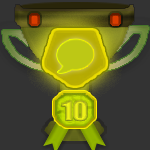
<style>
.page{position:relative;width:150px;height:150px;background:#333333}
.page>*{position:absolute;margin:0}
.t1{font:24.2px "Impact";scale:1.16 1}
</style>
<div class="page">
<p class="t1" style="left:62px;top:100px;width:25px;height:21px">10</p>
</div>
